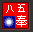
<style>
.page{position:relative;width:33px;height:32px;background:#f20000}
.page>*{position:absolute;margin:0}
.t1{font:10.4px "SimSun";color:#ffffff}
.t2{font:11.7px "SimSun";color:#ffffff}
</style>
<div class="page">
<p class="t1" style="left:6px;top:4px;width:19px;height:9px">八五</p>
<p class="t2" style="left:16px;top:15px;width:11px;height:12px">奉</p>
</div>
